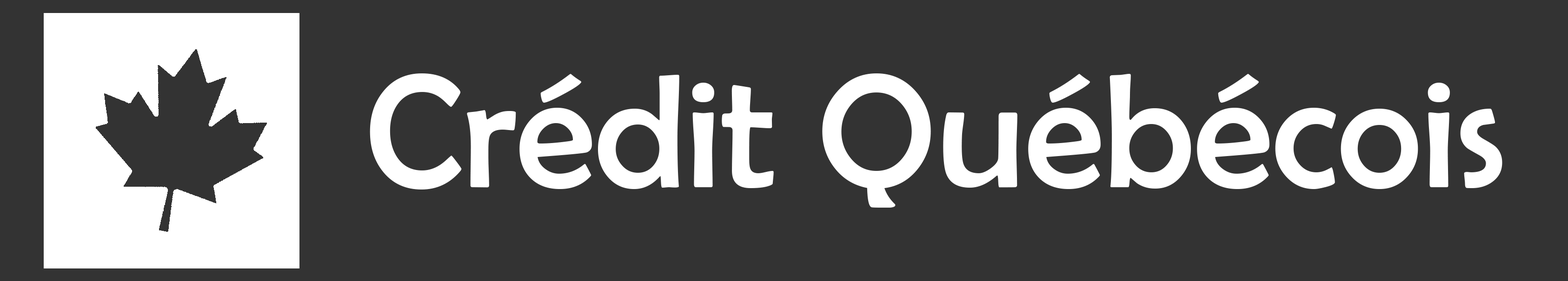
<style>
.page{position:relative;width:1568px;height:281px;background:#333333}
.page>*{position:absolute;margin:0}
.t1{font:162.8px "BerlinSansFB-Reg";color:#ffffff}
</style>
<div class="page">
<p class="t1" style="left:370px;top:73px;width:1132px;height:135px">Crédit Québécois</p>
</div>
